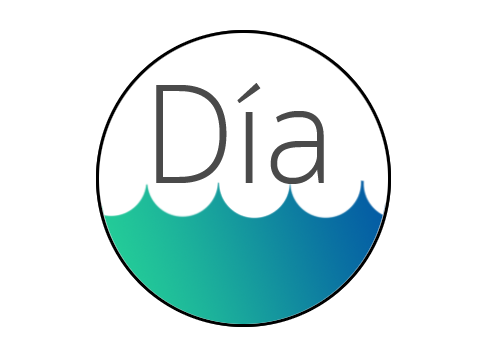
<style>
.page{position:relative;width:504px;height:360px;background:#ffffff}
.page>*{position:absolute;margin:0}
.t1{font:146.4px "SukhumvitSet-Thin";letter-spacing:0.005em;color:#4a4a4a;scale:0.96 1}
</style>
<div class="page">
<p class="t1" style="left:156px;top:83px;width:168px;height:101px">Día</p>
</div>
